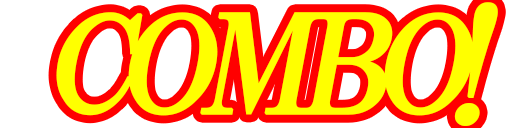
<style>
.page{position:relative;width:512px;height:128px;background:#ffffff}
.page>*{position:absolute;margin:0}
.t1{font:135.1px "HGPMinchoB";letter-spacing:-0.13em;color:#ffff00;font-weight:bold;font-style:italic;scale:1.07 1}
</style>
<div class="page">
<p class="t1" style="left:56px;top:2px;width:442px;height:124px">COMBO!</p>
</div>
